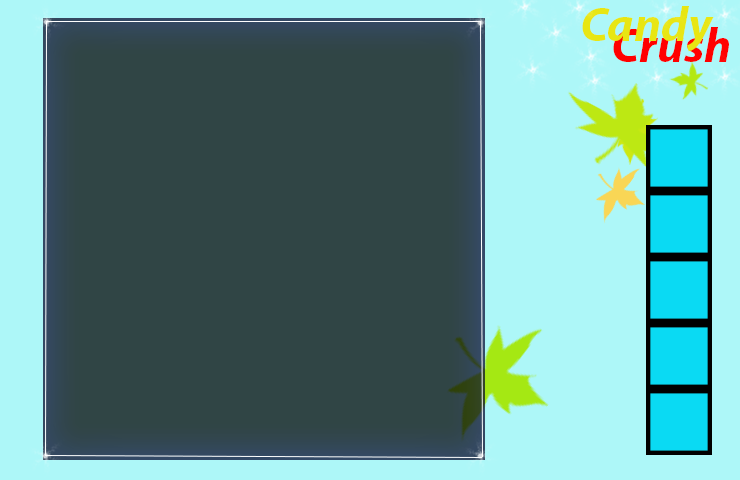
<style>
.page{position:relative;width:740px;height:480px;background:#304545}
.page>*{position:absolute;margin:0}
.t1{font:48px "MyriadPro-BoldIt";color:#e8e613}
.t2{font:48px "MyriadPro-BoldIt";color:#ff0000}
</style>
<div class="page">
<p class="t1" style="left:582px;top:6px;width:132px;height:46px">Candy</p>
<p class="t2" style="left:613px;top:27px;width:116px;height:35px">Crush</p>
</div>
